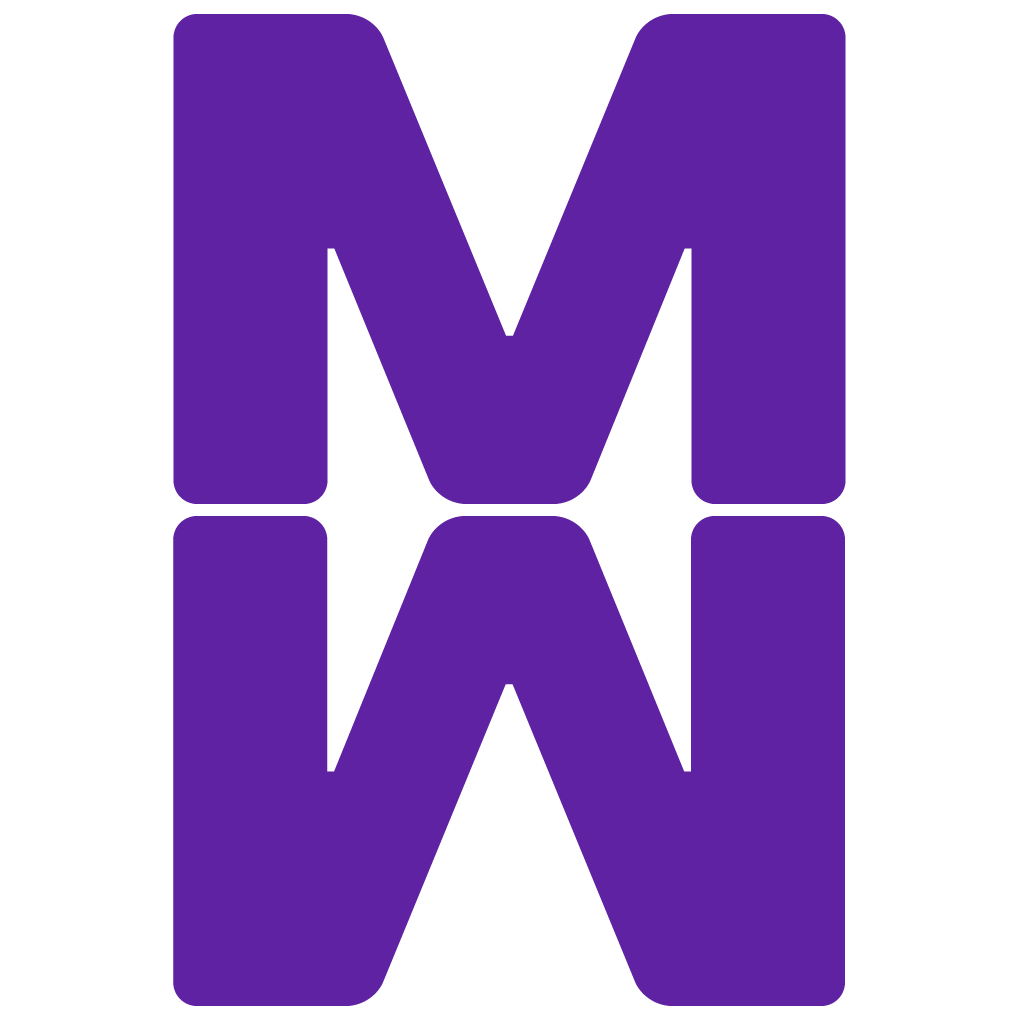
<style>
.page{position:relative;width:1024px;height:1024px;background:#ffffff}
.page>*{position:absolute;margin:0}
.t1{font:700px "DaysSansBlack";letter-spacing:0.07em;color:#5e22a3}
</style>
<div class="page">
<p class="t1" style="left:173px;top:14px;width:673px;height:490px">M</p>
<p class="t1" style="left:173px;top:516px;width:672px;height:490px;rotate:180deg">M</p>
</div>
